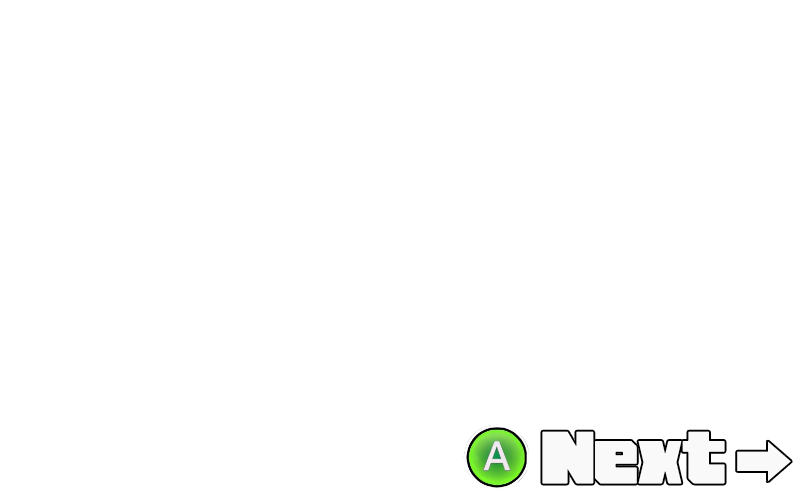
<style>
.page{position:relative;width:800px;height:500px;background:#ffffff}
.page>*{position:absolute;margin:0}
.t1{font:58.3px "AB-countryroad";letter-spacing:-0.1em;color:#f9f9f9}
</style>
<div class="page">
<p class="t1" style="left:542px;top:431px;width:183px;height:53px">Next</p>
</div>
